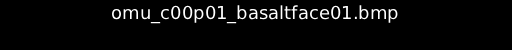
<style>
.page{position:relative;width:512px;height:50px;background:#000000}
.page>*{position:absolute;margin:0}
.t1{font:18px "DejaVuSans";color:#ffffff}
</style>
<div class="page">
<p class="t1" style="left:111px;top:5px;width:287px;height:19px">omu_c00p01_basaltface01.bmp</p>
</div>
